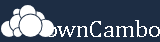
<style>
.page{position:relative;width:160px;height:42px;background:#1d2d44}
.page>*{position:absolute;margin:0}
.t1{font:24px "Cambria";color:#ffffff}
</style>
<div class="page">
<p class="t1" style="left:46px;top:20px;width:114px;height:17px">ownCambo</p>
</div>
